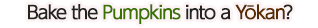
<style>
.page{position:relative;width:318px;height:28px;background:#ffffff}
.page>*{position:absolute;margin:0}
.t1{font:18px "UDShinGoPro-Regular";letter-spacing:-0.08em;color:#232320;font-weight:bold}
.t2{font:18px "UDShinGoPro-Regular";letter-spacing:-0.08em;color:#3a7103;font-weight:bold}
.t3{font:18px "UDShinGoPro-Regular";letter-spacing:-0.08em;color:#592b00;font-weight:bold}
</style>
<div class="page">
<p class="t1" style="left:28px;top:4px;width:265px;height:20px">Bake the <span class="t2">Pumpkins</span> into a <span class="t3">Yōkan</span>?</p>
</div>
